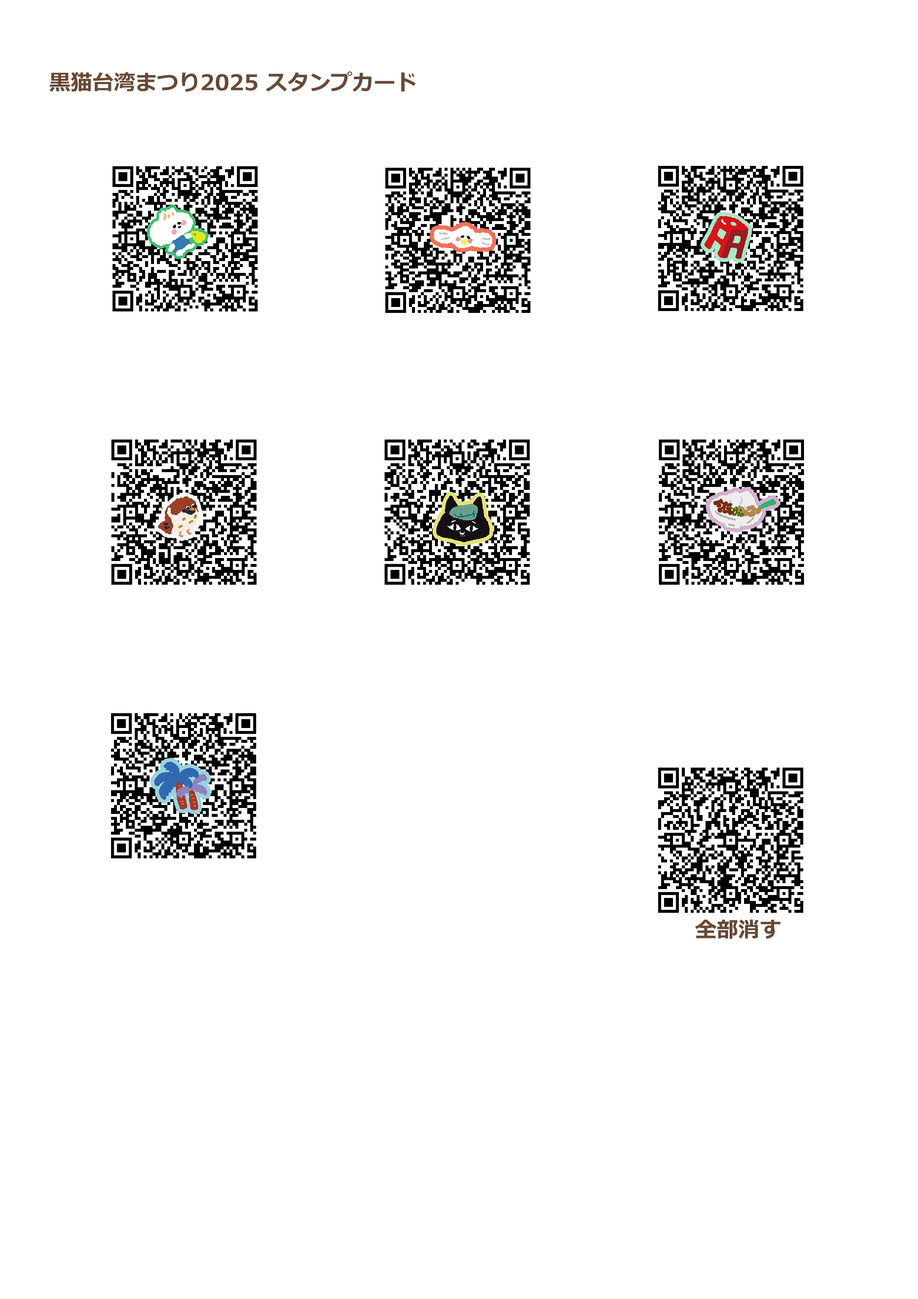
<style>
.page{position:relative;width:918px;height:1299px;background:#ffffff}
.page>*{position:absolute;margin:0}
.t1{font:21.6px "Meiryo-Bold";color:#684934}
</style>
<div class="page">
<p class="t1" style="left:49px;top:71px;width:367px;height:21px">黒猫台湾まつり2025 スタンプカード</p>
<p class="t1" style="left:695px;top:919px;width:86px;height:20px">全部消す</p>
</div>
